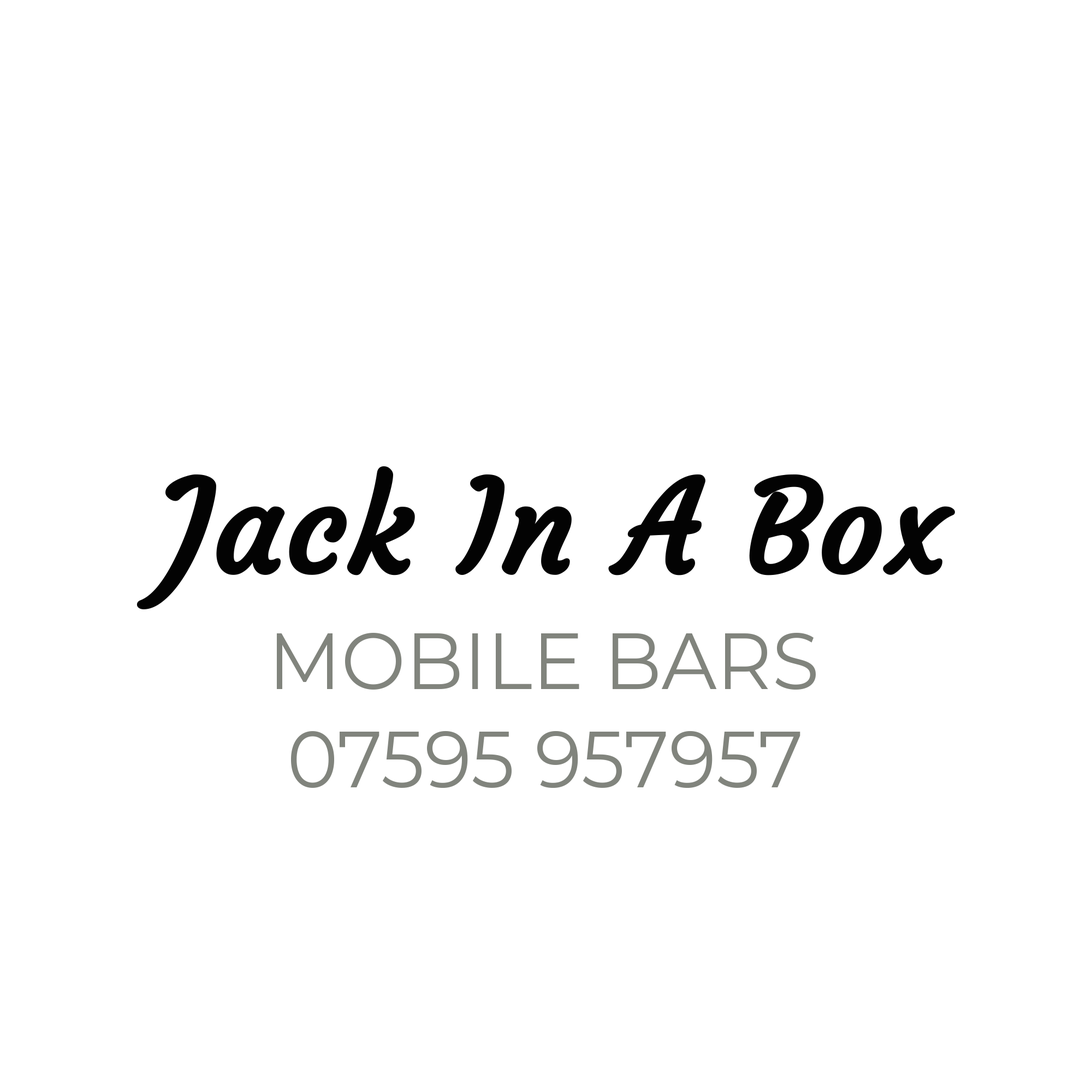
<style>
.page{position:relative;width:1092px;height:1092px;background:#ffffff}
.page>*{position:absolute;margin:0}
.t1{font:218.4px "Courgette-Regular";color:#030303;font-weight:bold}
.t2{font:136.5px "Montserrat-Regular";color:#81847d;scale:0.97 1}
</style>
<div class="page">
<p class="t1" style="left:136px;top:466px;width:819px;height:143px">Jack In A Box</p>
<p class="t2" style="left:277px;top:633px;width:539px;height:57px">MOBILE BARS</p>
<p class="t2" style="left:291px;top:731px;width:509px;height:57px">07595 957957</p>
</div>
